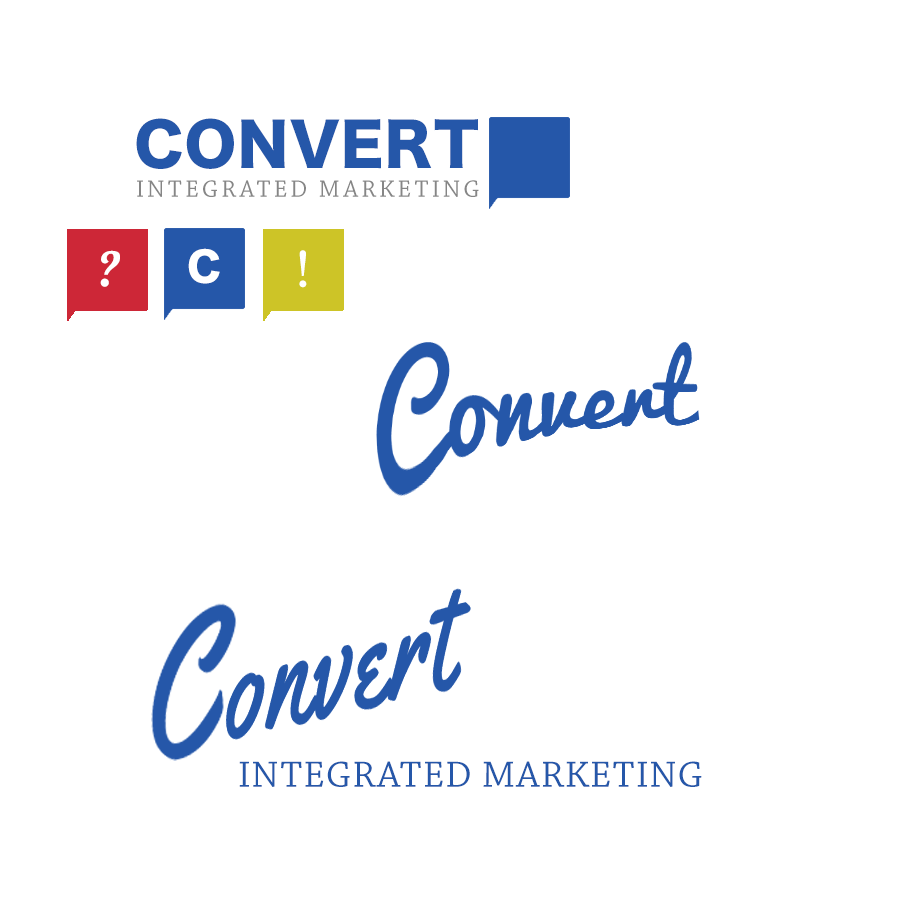
<style>
.page{position:relative;width:900px;height:900px;background:#ffffff}
.page>*{position:absolute;margin:0}
.t1{font:58.3px "HiraKakuStdN-W8";letter-spacing:0.02em;color:#2557a9}
.t2{font:25px "ChaparralPro-Regular";letter-spacing:0.12em;color:#868686}
.t3{font:51.3px "Lobster";letter-spacing:0.02em;color:#ffffff}
.t4{font:40px "HiraKakuStd-W8";letter-spacing:0.02em;color:#ffffff}
.t5{font:51.3px "Georgia";letter-spacing:0.02em;color:#ffffff}
.t6{font:38.4px "ChaparralPro-Regular";letter-spacing:0.02em;color:#2557a9}
</style>
<div class="page">
<p class="t1" style="left:136px;top:118px;width:342px;height:51px">CONVERT</p>
<p class="t2" style="left:137px;top:180px;width:342px;height:17px">INTEGRATED MARKETING</p>
<p class="t3" style="left:100px;top:250px;width:20px;height:37px">?</p>
<p class="t4" style="left:188px;top:248px;width:32px;height:36px">C</p>
<p class="t5" style="left:299px;top:250px;width:8px;height:38px">!</p>
<p class="t6" style="left:239px;top:761px;width:463px;height:26px">INTEGRATED MARKETING</p>
</div>
